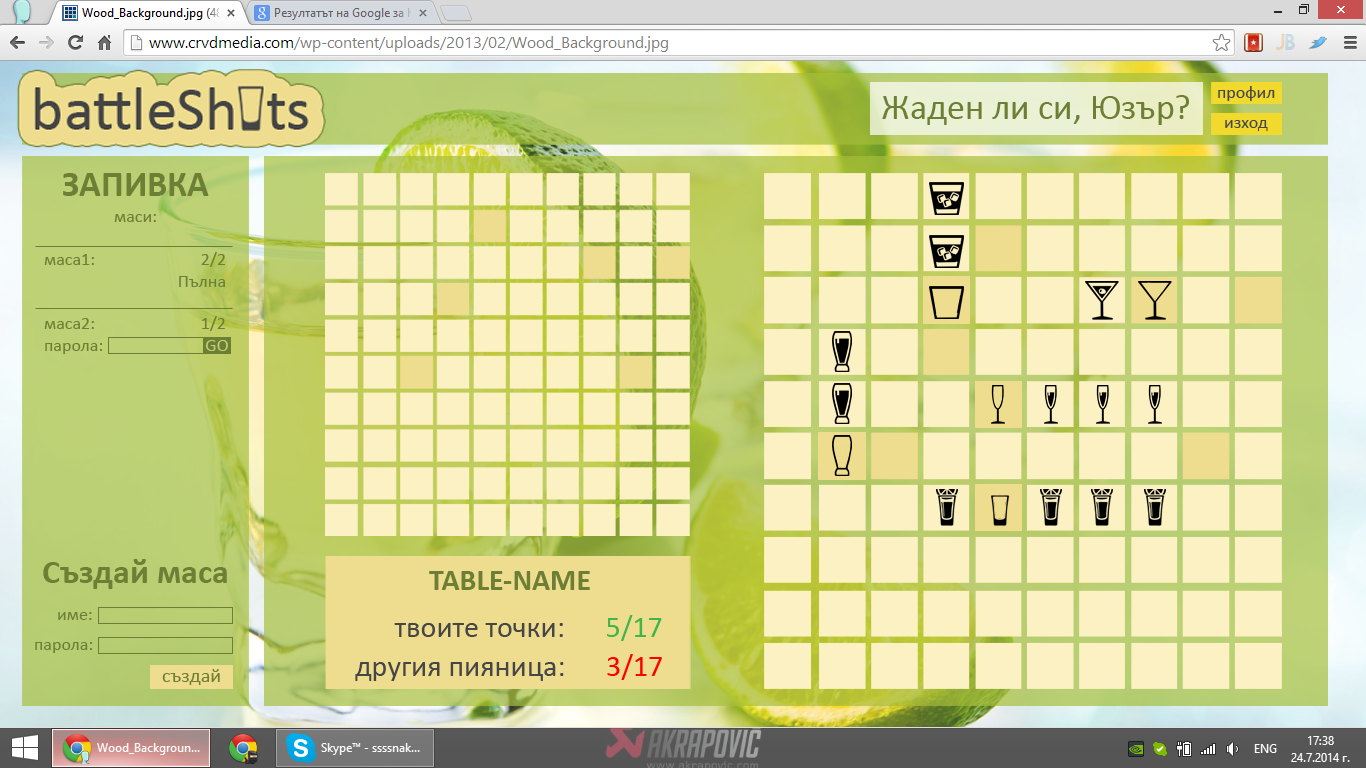
<style>
.page{position:relative;width:1366px;height:768px;background:#fcf1c3}
.page>*{position:absolute;margin:0}
.t1{font:18px "Calibri";color:#464646}
.t2{font:36px "Calibri";color:#6d7e35}
.t3{font:36px "Calibri-Bold";color:#6d7e35}
.t4{font:18px "Calibri";color:#6d7e35}
.t5{font:18px "Calibri";color:#bed176}
.t6{font:34px "Calibri-Bold";color:#6d7e35}
.t7{font:30px "Calibri-Bold";color:#6d7e35}
.t8{font:30px "Calibri";color:#464646}
.t9{font:30px "Calibri";color:#40b549}
.t10{font:30px "Calibri";color:#ff0000}
.t11{font:20px "Calibri";color:#6d7e35}
</style>
<div class="page">
<p class="t1" style="left:1218px;top:86px;width:57px;height:15px">профил</p>
<p class="t2" style="left:882px;top:95px;width:307px;height:30px">Жаден ли си, Юзър?</p>
<p class="t1" style="left:1225px;top:120px;width:43px;height:11px">изход</p>
<p class="t3" style="left:63px;top:173px;width:146px;height:23px">ЗАПИВКА</p>
<p class="t4" style="left:114px;top:214px;width:42px;height:8px">маси:</p>
<p class="t4" style="left:44px;top:252px;width:182px;height:35px;text-align:right">маса1:                          2/2<br>Пълна</p>
<p class="t4" style="left:44px;top:316px;width:181px;height:38px">маса2:                          1/2<br>парола:</p>
<p class="t5" style="left:205px;top:340px;width:23px;height:11px">GO</p>
<p class="t6" style="left:43px;top:559px;width:184px;height:30px">Създай маса</p>
<p class="t7" style="left:429px;top:571px;width:161px;height:19px">TABLE-NAME</p>
<p class="t4" style="left:58px;top:612px;width:34px;height:8px">име:</p>
<p class="t8" style="left:394px;top:615px;width:268px;height:26px">твоите точки:      <span class="t9">5/17</span></p>
<p class="t4" style="left:35px;top:642px;width:57px;height:11px">парола:</p>
<p class="t8" style="left:355px;top:654px;width:307px;height:27px">другия пияница:      <span class="t10">3/17</span></p>
<p class="t11" style="left:162px;top:669px;width:58px;height:16px">създай</p>
</div>
